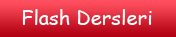
<style>
.page{position:relative;width:176px;height:37px}
.page>*{position:absolute;margin:0}
.t1{font:20px "ComicSansMS";color:#ffffff}
</style>
<div class="page">
<p class="t1" style="left:22px;top:9px;width:130px;height:16px">Flash Dersleri</p>
</div>
